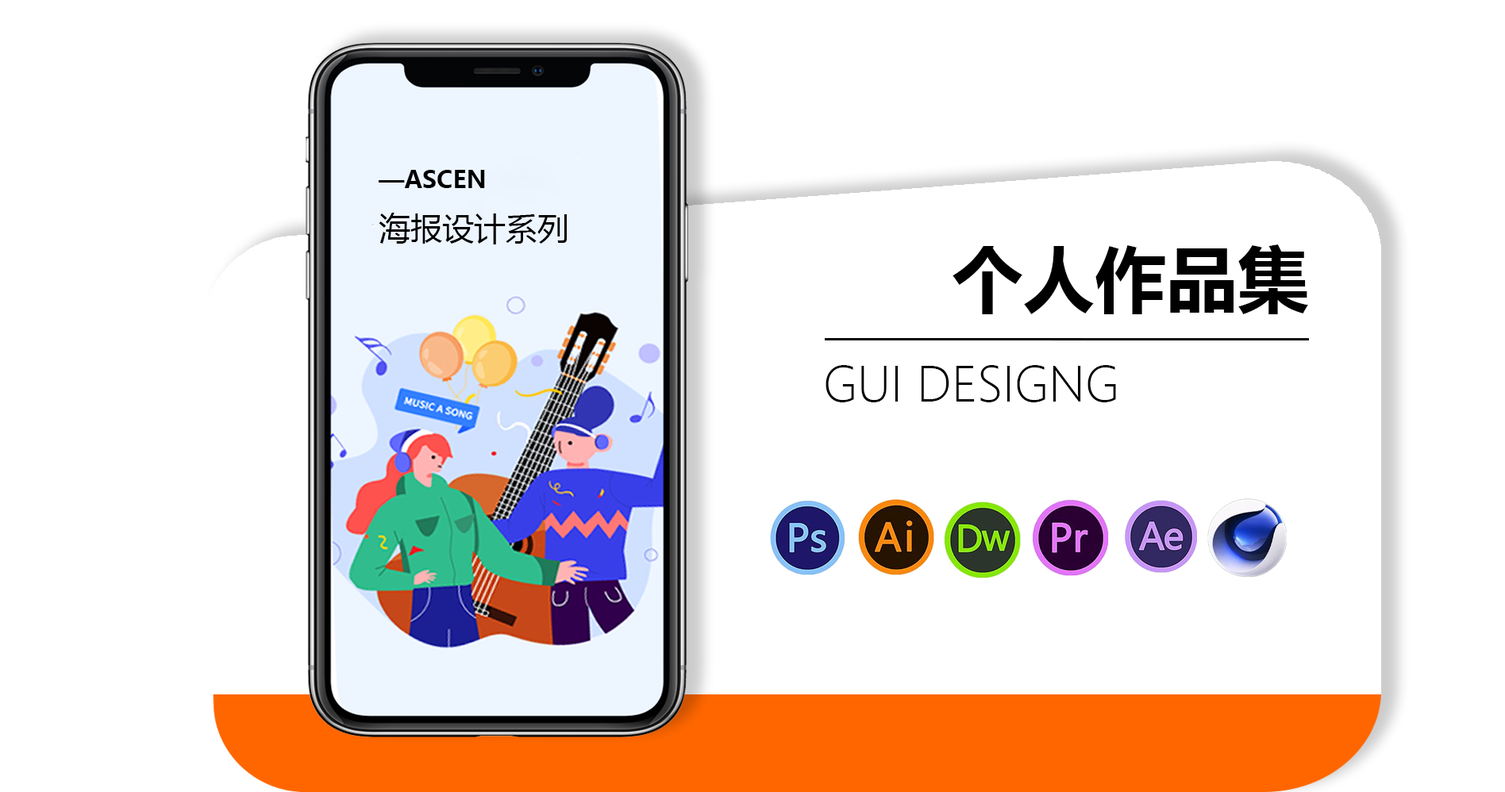
<style>
.page{position:relative;width:1505px;height:792px;background:#ffffff}
.page>*{position:absolute;margin:0}
.t1{font:23.8px "MicrosoftYaHei-Bold";color:#000000}
.t2{font:31.8px "MicrosoftYaHei";color:#000000}
.t3{font:71.4px "MicrosoftYaHei-Bold";color:#000000}
.t4{font:47.6px "MicrosoftYaHeiLight";color:#000000}
</style>
<div class="page">
<p class="t1" style="left:379px;top:170px;width:106px;height:18px">—ASCEN</p>
<p class="t2" style="left:379px;top:213px;width:188px;height:32px">海报设计系列</p>
<p class="t3" style="left:953px;top:245px;width:355px;height:69px">个人作品集</p>
<p class="t4" style="left:826px;top:365px;width:290px;height:37px">GUI DESIGNG</p>
</div>
